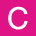
<style>
.page{position:relative;width:36px;height:36px;background:#df1286}
.page>*{position:absolute;margin:0}
.t1{font:30px "Helvetica";letter-spacing:-0.025em;color:#ffffff}
</style>
<div class="page">
<p class="t1" style="left:8px;top:6px;width:20px;height:24px">С</p>
</div>
